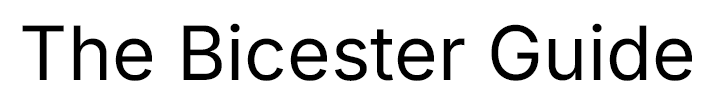
<style>
.page{position:relative;width:712px;height:110px;background:#ffffff}
.page>*{position:absolute;margin:0}
.t1{font:75px "Inter-Regular";color:#000000}
</style>
<div class="page">
<p class="t1" style="left:22px;top:23px;width:670px;height:58px">The Bicester Guide</p>
</div>
